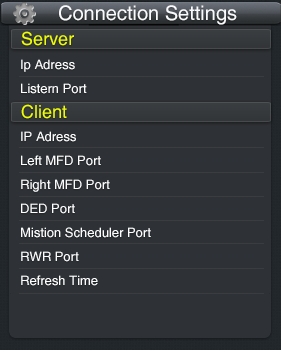
<style>
.page{position:relative;width:281px;height:350px;background:#2e3135}
.page>*{position:absolute;margin:0}
.t1{font:20px "Helvetica";color:#f9fafc}
.t2{font:18px "Helvetica";color:#eefd00}
.t3{font:13px/24px "Helvetica";color:#fcfdfe}
</style>
<div class="page">
<p class="t1" style="left:59px;top:5px;width:178px;height:20px">Connection Settings</p>
<p class="t2" style="left:21px;top:31px;width:53px;height:15px">Server</p>
<p class="t3" style="left:21px;top:59px;width:130px;height:227px">Ip Adress<br>Listern Port<br><br>IP Adress<br>Left MFD Port<br>Right MFD Port<br>DED Port<br>Mistion Scheduler Port<br>RWR Port<br>Refresh Time</p>
<p class="t2" style="left:21px;top:104px;width:46px;height:15px">Client</p>
</div>
